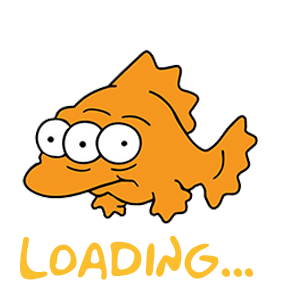
<style>
.page{position:relative;width:300px;height:300px;background:#ffffff}
.page>*{position:absolute;margin:0}
.t1{font:50px "Simpsonfont";color:#fbc02d}
</style>
<div class="page">
<p class="t1" style="left:20px;top:235px;width:233px;height:45px">Loading...</p>
</div>
